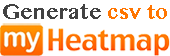
<style>
.page{position:relative;width:170px;height:56px;background:#ffffff}
.page>*{position:absolute;margin:0}
.t1{font:21.5px "MalayalamMN-Bold";color:#424242}
.t2{font:20.5px "MalayalamMN-Bold";color:#ff7500}
</style>
<div class="page">
<p class="t1" style="left:3px;top:4px;width:164px;height:15px">Generate <span class="t2">csv to</span></p>
</div>
